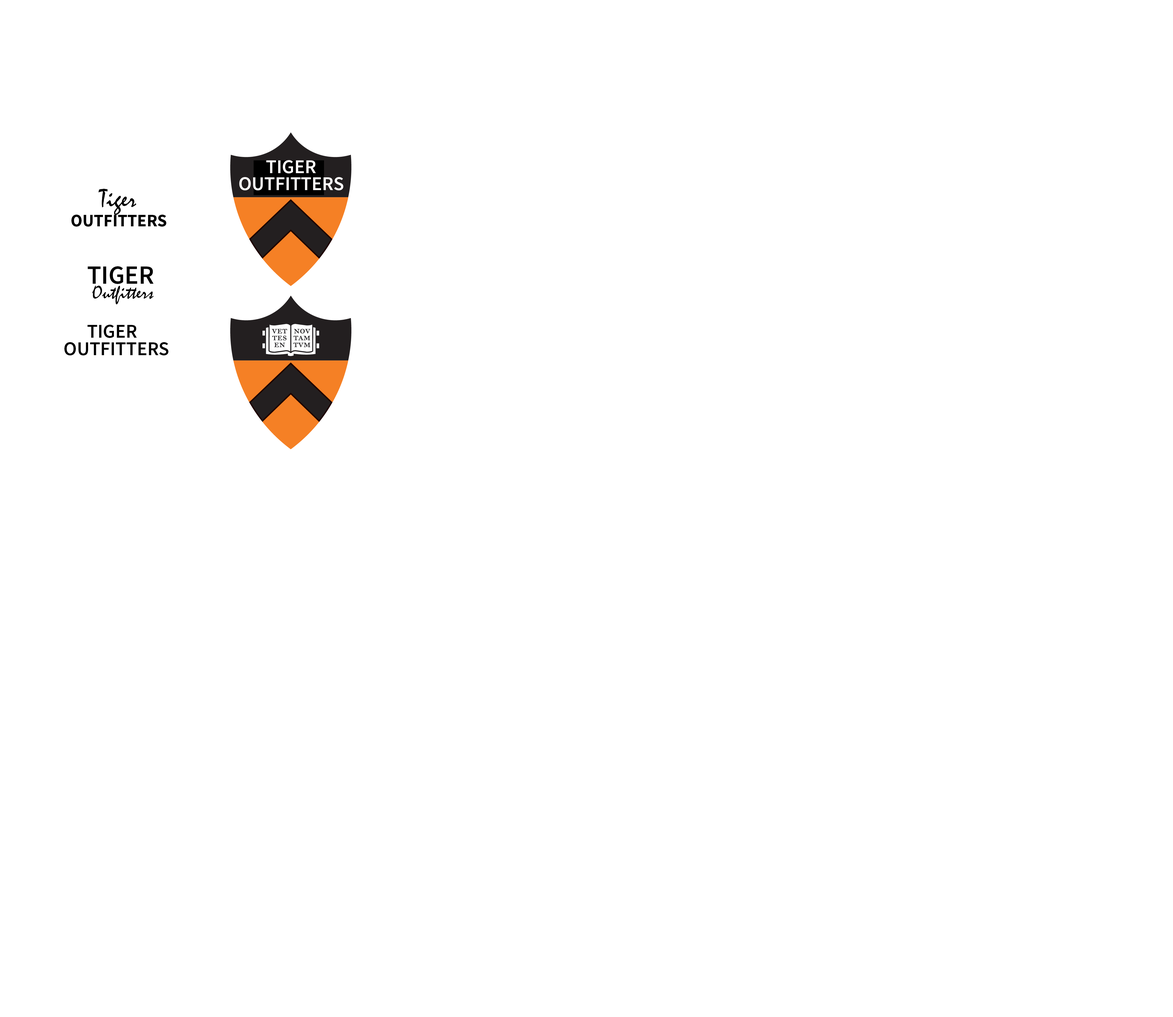
<style>
.page{position:relative;width:1173px;height:1017px;background:#ffffff}
.page>*{position:absolute;margin:0}
.t1{font:19.5px "SourceSansPro-Semibold";color:#fefcfc}
.t2{font:26.1px "Mistral";color:#020202}
.t3{font:17.4px "SourceSansPro-Bold";color:#020202}
.t4{font:26.1px "SourceSansPro-Semibold";color:#020202}
.t5{font:19.5px "Mistral";color:#020202}
.t6{font:19.5px "SourceSansPro-Semibold";color:#020202}
</style>
<div class="page">
<p class="t1" style="left:266px;top:160px;width:50px;height:13px">TIGER</p>
<p class="t1" style="left:239px;top:177px;width:104px;height:13px">OUTFITTERS</p>
<p class="t2" style="left:98px;top:189px;width:38px;height:26px">Tiger</p>
<p class="t3" style="left:71px;top:215px;width:95px;height:12px">OUTFITTERS</p>
<p class="t4" style="left:88px;top:266px;width:66px;height:18px">TIGER</p>
<p class="t5" style="left:92px;top:285px;width:62px;height:19px">Outfitters</p>
<p class="t6" style="left:87px;top:325px;width:50px;height:13px">TIGER</p>
<p class="t6" style="left:64px;top:342px;width:104px;height:13px">OUTFITTERS</p>
</div>
